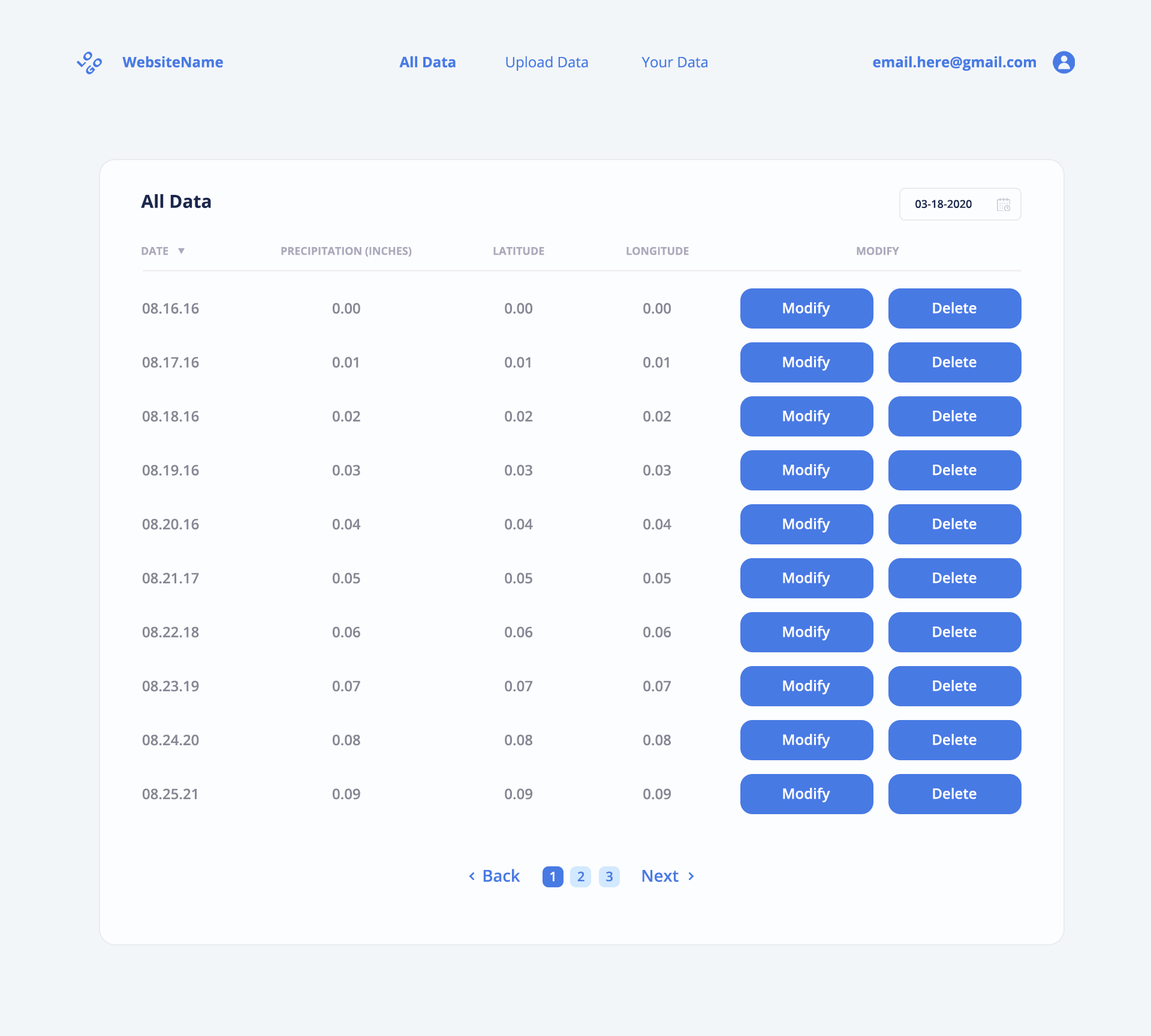
<style>
.page{position:relative;width:1151px;height:1036px;background:#fcfdfe}
.page>*{position:absolute;margin:0}
.t1{font:9.6px "OpenSans-Bold";color:#487ae4;scale:1.45 1}
.t2{font:14.4px "OpenSans-Bold";color:#487ae4}
.t3{font:14.4px "OpenSans";color:#487ae4}
.t4{font:18px "OpenSans-Bold";color:#1a274e}
.t5{font:10.9px "OpenSans-Semibold";color:#1a274e}
.t6{font:10.8px "OpenSans-Bold";color:#aca9bc}
.t7{font:14.4px/54px "OpenSans-Semibold";color:#858894}
.t8{font:14.4px "OpenSans-Semibold";color:#ffffff}
.t9{font:16.4px "OpenSans-Semibold";color:#487ae4}
.t10{font:13.1px "OpenSans-Semibold";color:#ffffff}
.t11{font:13.1px "OpenSans-Semibold";color:#487ae4}
</style>
<div class="page">
<p class="t1" style="left:77px;top:52px;width:25px;height:22px;rotate:-45deg">LO<br>GO</p>
<p class="t2" style="left:122px;top:56px;width:101px;height:12px">WebsiteName</p>
<p class="t2" style="left:399px;top:56px;width:57px;height:12px">All Data</p>
<p class="t3" style="left:506px;top:56px;width:82px;height:15px">Upload Data</p>
<p class="t3" style="left:641px;top:57px;width:66px;height:11px">Your Data</p>
<p class="t2" style="left:873px;top:56px;width:163px;height:15px">email.here@gmail.com</p>
<p class="t4" style="left:141px;top:194px;width:70px;height:14px">All Data</p>
<p class="t5" style="left:915px;top:200px;width:57px;height:8px">03-18-2020</p>
<p class="t6" style="left:141px;top:247px;width:27px;height:8px">DATE</p>
<p class="t6" style="left:281px;top:247px;width:131px;height:10px">PRECIPITATION (INCHES)</p>
<p class="t6" style="left:493px;top:247px;width:51px;height:8px">LATITUDE</p>
<p class="t6" style="left:626px;top:247px;width:63px;height:8px">LONGITUDE</p>
<p class="t6" style="left:857px;top:247px;width:42px;height:8px">MODIFY</p>
<p class="t7" style="left:142px;top:303px;width:57px;height:497px">08.16.16<br>08.17.16<br>08.18.16<br>08.19.16<br>08.20.16<br>08.21.17<br>08.22.18<br>08.23.19<br>08.24.20<br>08.25.21</p>
<p class="t7" style="left:332px;top:303px;width:29px;height:497px">0.00<br>0.01<br>0.02<br>0.03<br>0.04<br>0.05<br>0.06<br>0.07<br>0.08<br>0.09</p>
<p class="t7" style="left:505px;top:303px;width:28px;height:497px;text-align:right">0.00<br>0.01<br>0.02<br>0.03<br>0.04<br>0.05<br>0.06<br>0.07<br>0.08<br>0.09</p>
<p class="t7" style="left:643px;top:303px;width:28px;height:497px;text-align:right">0.00<br>0.01<br>0.02<br>0.03<br>0.04<br>0.05<br>0.06<br>0.07<br>0.08<br>0.09</p>
<p class="t8" style="left:783px;top:302px;width:47px;height:15px">Modify</p>
<p class="t8" style="left:933px;top:302px;width:44px;height:12px">Delete</p>
<p class="t8" style="left:783px;top:356px;width:47px;height:15px">Modify</p>
<p class="t8" style="left:933px;top:356px;width:44px;height:11px">Delete</p>
<p class="t8" style="left:783px;top:409px;width:47px;height:16px">Modify</p>
<p class="t8" style="left:933px;top:410px;width:44px;height:11px">Delete</p>
<p class="t8" style="left:783px;top:463px;width:47px;height:16px">Modify</p>
<p class="t8" style="left:933px;top:464px;width:44px;height:11px">Delete</p>
<p class="t8" style="left:783px;top:517px;width:47px;height:16px">Modify</p>
<p class="t8" style="left:933px;top:518px;width:44px;height:11px">Delete</p>
<p class="t8" style="left:783px;top:571px;width:47px;height:16px">Modify</p>
<p class="t8" style="left:933px;top:572px;width:44px;height:11px">Delete</p>
<p class="t8" style="left:783px;top:625px;width:47px;height:16px">Modify</p>
<p class="t8" style="left:933px;top:626px;width:44px;height:11px">Delete</p>
<p class="t8" style="left:783px;top:679px;width:47px;height:16px">Modify</p>
<p class="t8" style="left:933px;top:680px;width:44px;height:11px">Delete</p>
<p class="t8" style="left:783px;top:733px;width:47px;height:16px">Modify</p>
<p class="t8" style="left:933px;top:734px;width:44px;height:11px">Delete</p>
<p class="t8" style="left:783px;top:787px;width:47px;height:16px">Modify</p>
<p class="t8" style="left:933px;top:788px;width:44px;height:11px">Delete</p>
<p class="t9" style="left:483px;top:869px;width:37px;height:13px">Back</p>
<p class="t9" style="left:642px;top:870px;width:37px;height:12px">Next</p>
<p class="t10" style="left:550px;top:872px;width:5px;height:9px">1</p>
<p class="t11" style="left:577px;top:871px;width:8px;height:10px">2</p>
<p class="t11" style="left:606px;top:871px;width:7px;height:10px">3</p>
</div>
